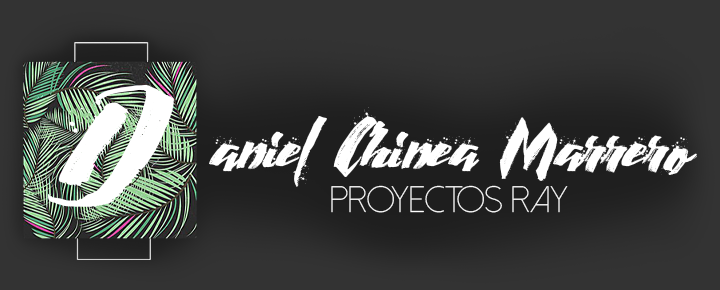
<style>
.page{position:relative;width:720px;height:290px;background:#333333}
.page>*{position:absolute;margin:0}
.t1{font:240.6px "Calligraphywet";color:#ffffff}
.t2{font:105.8px "Calligraphywet";color:#ffffff}
.t3{font:36.8px "DolceVitaLight";color:#ffffff}
</style>
<div class="page">
<p class="t1" style="left:48px;top:84px;width:126px;height:123px">D</p>
<p class="t2" style="left:209px;top:107px;width:488px;height:80px">aniel Chinea Marrero</p>
<p class="t3" style="left:331px;top:185px;width:237px;height:28px">proyectos ray</p>
</div>
